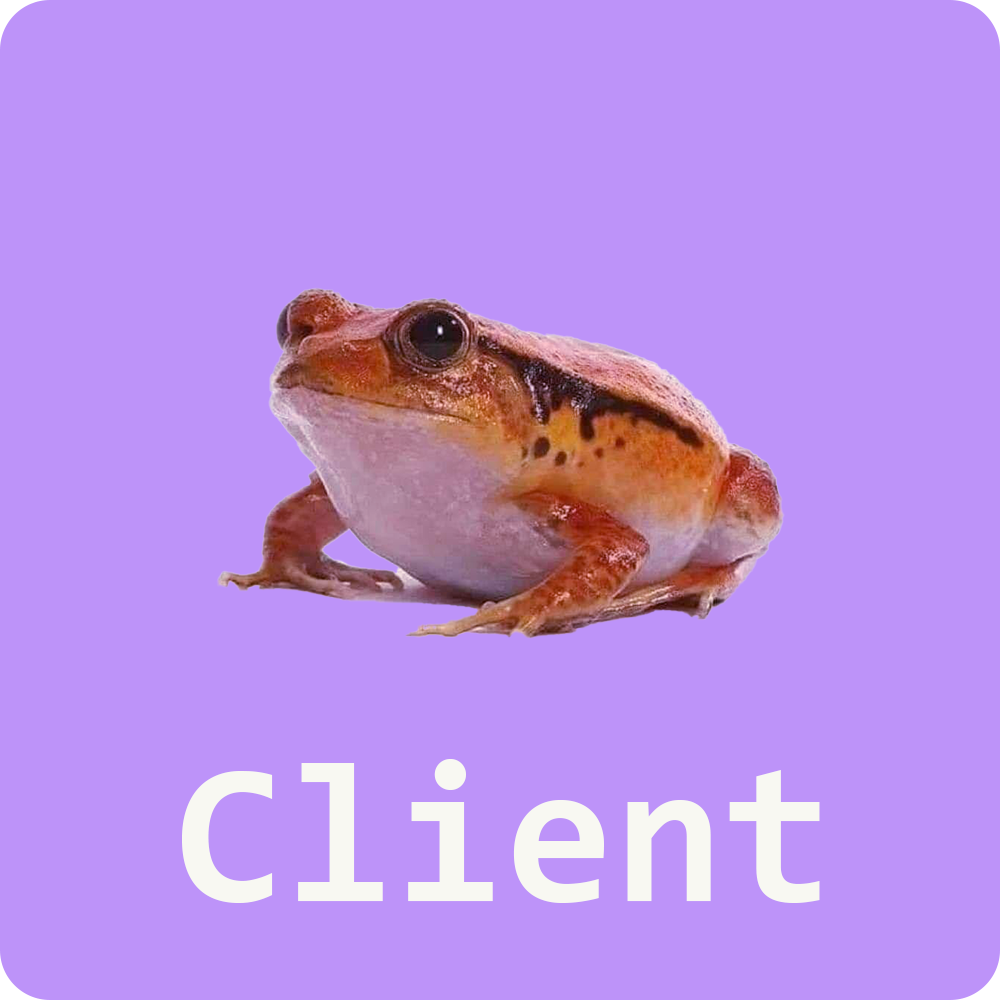
<style>
.page{position:relative;width:1000px;height:1000px;background:#bd93f9}
.page>*{position:absolute;margin:0}
.t1{font:200px "Consolas-Bold";color:#f8f8f2}
</style>
<div class="page">
<p class="t1" style="left:182px;top:759px;width:638px;height:144px">Client</p>
</div>
